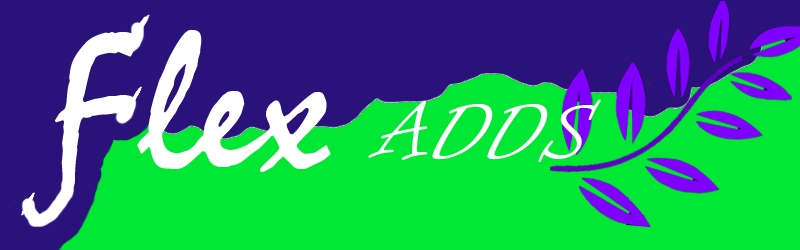
<style>
.page{position:relative;width:800px;height:250px;background:#00e834}
.page>*{position:absolute;margin:0}
.t1{font:210px "Mistral";color:#ffffff}
.t2{font:90px "InformalRoman-Regular";color:#ffffff}
</style>
<div class="page">
<p class="t1" style="left:55px;top:29px;width:276px;height:160px">Flex</p>
<p class="t2" style="left:368px;top:99px;width:233px;height:63px">ADDS</p>
</div>
